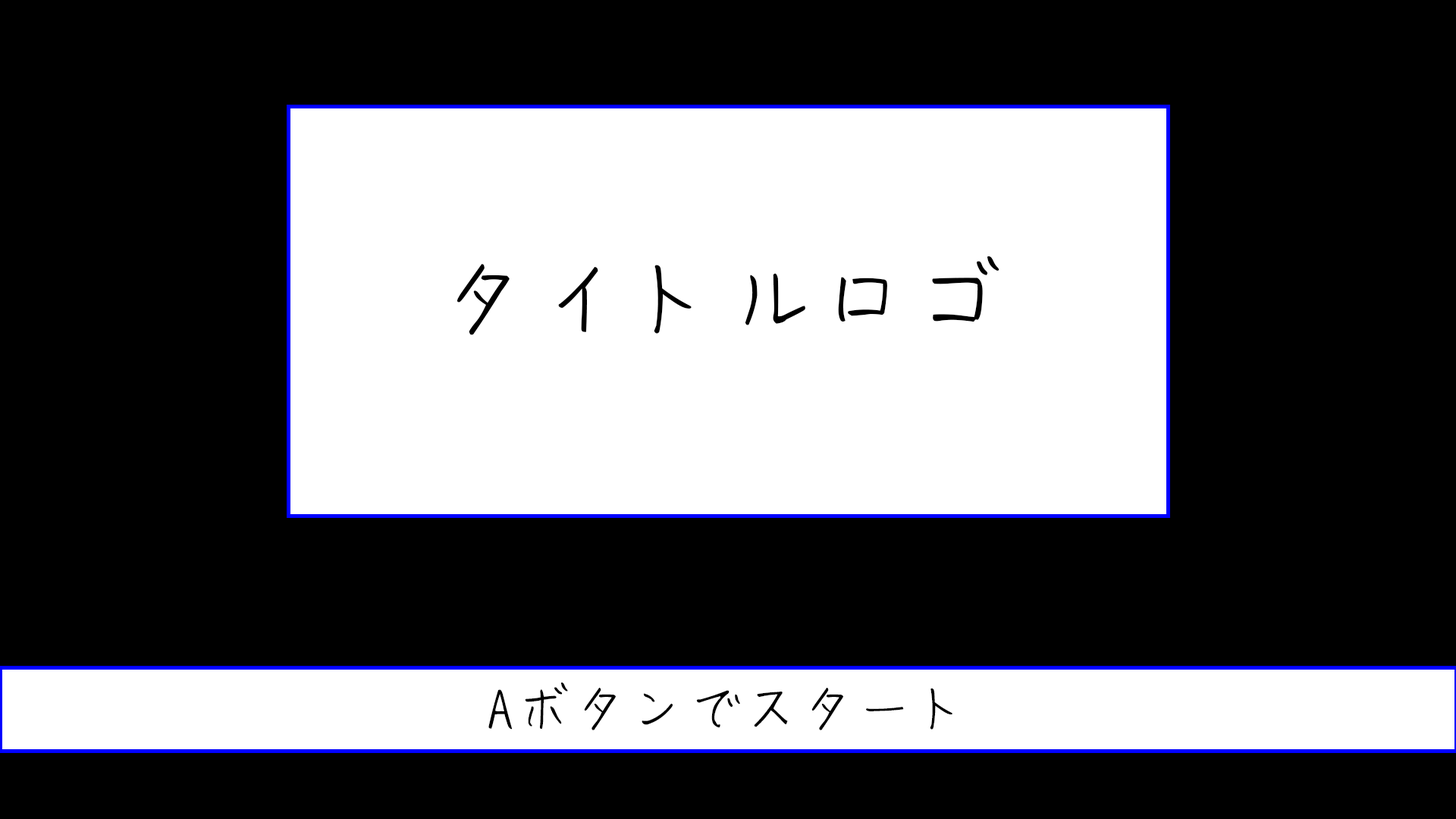
<style>
.page{position:relative;width:1456px;height:819px;background:#000000}
.page>*{position:absolute;margin:0}
.t1{font:94.8px "TA_oonishi";color:#000000}
.t2{font:56.9px "TA_oonishi";color:#000000}
</style>
<div class="page">
<p class="t1" style="left:457px;top:256px;width:542px;height:79px">タイトルロゴ</p>
<p class="t2" style="left:488px;top:682px;width:464px;height:48px">Aボタンでスタート</p>
</div>
